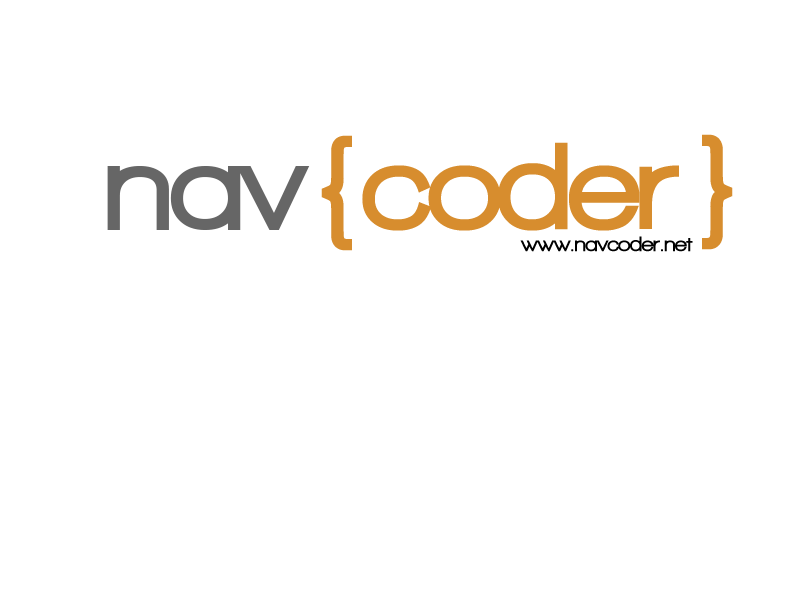
<style>
.page{position:relative;width:800px;height:600px;background:#ffffff}
.page>*{position:absolute;margin:0}
.t1{font:127px "WalkwayBlack";color:#d88d2f}
.t2{font:127px "WalkwayBlack";color:#666666}
.t3{font:21.2px "WalkwayBlack";color:#000000}
</style>
<div class="page">
<p class="t1" style="left:321px;top:135px;width:31px;height:116px">{</p>
<p class="t1" style="left:702px;top:134px;width:31px;height:116px">}</p>
<p class="t1" style="left:362px;top:142px;width:317px;height:89px">coder</p>
<p class="t2" style="left:107px;top:166px;width:203px;height:64px">nav</p>
<p class="t3" style="left:520px;top:236px;width:173px;height:16px">www.navcoder.net</p>
</div>
